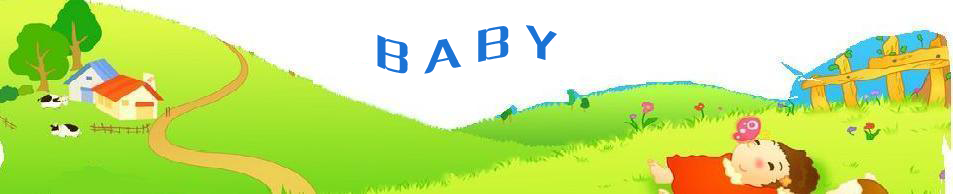
<style>
.page{position:relative;width:953px;height:194px;background:#ffffff}
.page>*{position:absolute;margin:0}
.t1{font:48px "FZCQJW--GB1-0";color:#1c73d4}
</style>
<div class="page">
<p class="t1" style="left:377px;top:25px;width:180px;height:49px">B A B Y</p>
</div>
